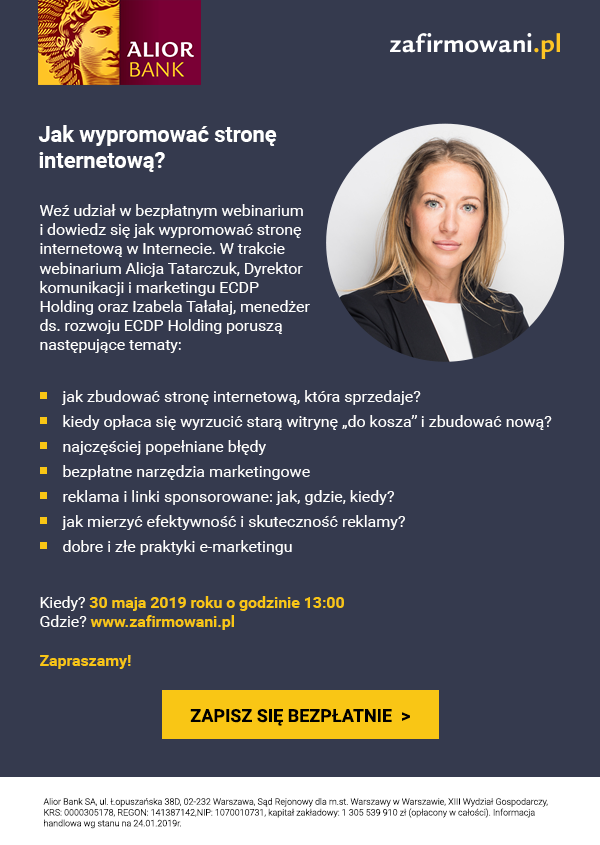
<style>
.page{position:relative;width:600px;height:845px;background:#353a4e}
.page>*{position:absolute;margin:0}
.t1{font:22px "Roboto-Bold";letter-spacing:-0.005em;color:#ffffff}
.t2{font:16px "Roboto-Regular";letter-spacing:-0.005em;color:#ffffff}
.t3{font:16px/25px "Roboto-Regular";color:#ffffff}
.t4{font:16px "Roboto-Bold";letter-spacing:-0.005em;color:#f9c615}
.t5{font:18px "Roboto-Bold";color:#000000;text-transform:uppercase}
.t6{font:9px "Roboto-Light";letter-spacing:-0.005em;color:#000000}
</style>
<div class="page">
<p class="t1" style="left:38px;top:125px;width:239px;height:47px">Jak wypromować stronę internetową?</p>
<p class="t2" style="left:39px;top:204px;width:271px;height:149px">Weź udział w bezpłatnym webinarium i dowiedz się jak wypromować stronę internetową w Internecie. W trakcie webinarium Alicja Tatarczuk, Dyrektor komunikacji i marketingu ECDP Holding oraz Izabela Tałałaj, menedżer ds. rozwoju ECDP Holding poruszą następujące tematy:</p>
<p class="t3" style="left:61px;top:390px;width:491px;height:165px">jak zbudować stronę internetową, która sprzedaje?<br>kiedy opłaca się wyrzucić starą witrynę „do kosza” i zbudować nową?<br>najczęściej popełniane błędy<br>bezpłatne narzędzia marketingowe<br>reklama i linki sponsorowane: jak, gdzie, kiedy?<br>jak mierzyć efektywność i skuteczność reklamy?<br>dobre i złe praktyki e-marketingu</p>
<p class="t4" style="left:40px;top:596px;width:304px;height:73px"><span class="t2">Kiedy? </span>30 maja 2019 roku o godzinie 13:00<br><span class="t2">Gdzie? </span>www.zafirmowani.pl<br><br>Zapraszamy!</p>
<p class="t5" style="left:190px;top:709px;width:220px;height:17px">Zapisz się bezpłatnie  &gt;</p>
<p class="t6" style="left:43px;top:798px;width:505px;height:31px">Alior Bank SA, ul. Łopuszańska 38D, 02-232 Warszawa, Sąd Rejonowy dla m.st. Warszawy w Warszawie, XIII Wydział Gospodarczy, KRS: 0000305178, REGON: 141387142,NIP: 1070010731, kapitał zakładowy: 1 305 539 910 zł (opłacony w całości). Informacja handlowa wg stanu na 24.01.2019r.</p>
</div>
